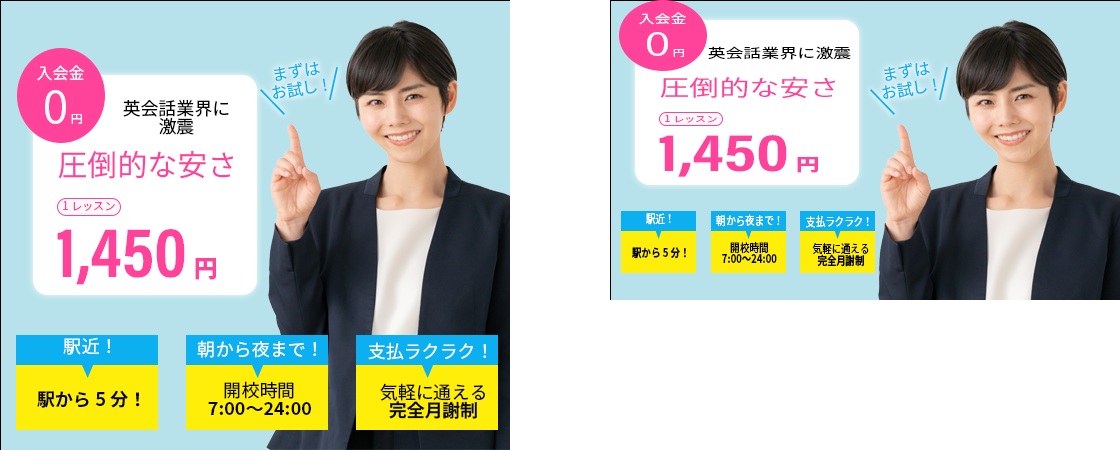
<style>
.page{position:relative;width:1120px;height:450px;background:#ffffff}
.page>*{position:absolute;margin:0}
.t1{font:12px/13.5px "SourceHanSans-Regular";color:#fdf9f9;scale:1.34 1}
.t2{font:33.7px/13.5px "SourceHanSans-Regular";color:#fdf9f9;scale:1.34 1}
.t3{font:9px/13.5px "SourceHanSans-Regular";color:#fdf9f9;scale:1.34 1}
.t4{font:13.5px "SourceHanSans-Regular";color:#040404;scale:1.34 1}
.t5{font:16px/18px "SourceHanSans-Regular";color:#fdf9f9}
.t6{font:45px/18px "SourceHanSans-Regular";color:#fdf9f9}
.t7{font:12px/18px "SourceHanSans-Regular";color:#fdf9f9}
.t8{font:16px/18px "SourceHanSans-Regular";color:#0caff0}
.t9{font:22.5px "SourceHanSans-Regular";color:#ff429a;scale:1.34 1}
.t10{font:18px/18px "SourceHanSans-Regular";color:#040404}
.t11{font:8.2px "SourceHanSans-Regular";color:#ff429a;scale:1.34 1}
.t12{font:53.9px "AcuminConcept-CondensedBold";color:#ff429a;scale:1.34 1}
.t13{font:18px "SourceHanSans-Heavy";color:#ff429a;scale:1.34 1}
.t14{font:30px "SourceHanSans-Regular";color:#ff429a}
.t15{font:11px "SourceHanSans-Regular";color:#ff429a}
.t16{font:11.7px "SourceHanSans-Regular";color:#ffffff;scale:0.81 1}
.t17{font:72px "AcuminConcept-CondensedBold";color:#ff429a}
.t18{font:24px "SourceHanSans-Heavy";color:#ff429a}
.t19{font:11.7px/11.7px "SourceHanSans-Bold";color:#060606;scale:0.81 1}
.t20{font:11.7px/11.7px "SourceHanSans-Regular";color:#060606;scale:0.81 1}
.t21{font:11.7px "SourceHanSans-Bold";color:#060606;scale:0.81 1}
.t22{font:18px "SourceHanSans-Regular";color:#ffffff}
.t23{font:18px "SourceHanSans-Bold";color:#060606}
.t24{font:18px/18px "SourceHanSans-Bold";color:#060606}
.t25{font:18px/18px "SourceHanSans-Regular";color:#060606}
</style>
<div class="page">
<p class="t1" style="left:639px;top:12px;width:47px;height:45px;text-align:center">入会金<br><span class="t2"> 0</span><span class="t3">円</span></p>
<p class="t4" style="left:708px;top:46px;width:143px;height:14px">英会話業界に激震</p>
<p class="t5" style="left:37px;top:65px;width:47px;height:59px;text-align:center">入会金<br><span class="t6"> 0</span><span class="t7">円</span></p>
<p class="t8" style="left:272px;top:61px;width:55px;height:38px;text-align:center;rotate:-9deg">まずは<br>お試し!</p>
<p class="t8" style="left:882px;top:61px;width:55px;height:38px;text-align:center;rotate:-9deg">まずは<br>お試し!</p>
<p class="t9" style="left:660px;top:76px;width:176px;height:23px">圧倒的な安さ</p>
<p class="t10" style="left:123px;top:99px;width:106px;height:36px;text-align:center">英会話業界に<br>激震</p>
<p class="t11" style="left:665px;top:115px;width:52px;height:8px">1レッスン</p>
<p class="t12" style="left:659px;top:135px;width:159px;height:42px">1,450<span class="t13">円</span></p>
<p class="t14" style="left:58px;top:150px;width:176px;height:29px">圧倒的な安さ</p>
<p class="t15" style="left:63px;top:201px;width:52px;height:10px">1レッスン</p>
<p class="t16" style="left:646px;top:213px;width:25px;height:12px">駅近！</p>
<p class="t16" style="left:716px;top:214px;width:64px;height:13px">朝から夜まで！</p>
<p class="t16" style="left:806px;top:215px;width:63px;height:13px">支払ラクラク！</p>
<p class="t17" style="left:57px;top:229px;width:159px;height:56px">1,450<span class="t18">円</span></p>
<p class="t19" style="left:722px;top:242px;width:55px;height:21px;text-align:center"><span class="t20">開校時間<br></span>7:00〜24:00</p>
<p class="t20" style="left:812px;top:243px;width:57px;height:24px;text-align:center">気軽に通える<br><span class="t19">完全月謝制</span></p>
<p class="t21" style="left:632px;top:247px;width:54px;height:12px">駅から5分！</p>
<p class="t22" style="left:63px;top:337px;width:47px;height:18px">駅近！</p>
<p class="t22" style="left:197px;top:340px;width:119px;height:18px">朝から夜まで！</p>
<p class="t22" style="left:368px;top:342px;width:118px;height:18px">支払ラクラク！</p>
<p class="t23" style="left:37px;top:390px;width:103px;height:18px">駅から5分！</p>
<p class="t24" style="left:208px;top:381px;width:103px;height:34px;text-align:center"><span class="t25">開校時間<br></span>7:00〜24:00</p>
<p class="t25" style="left:380px;top:383px;width:105px;height:36px;text-align:center">気軽に通える<br><span class="t24">完全月謝制</span></p>
</div>
